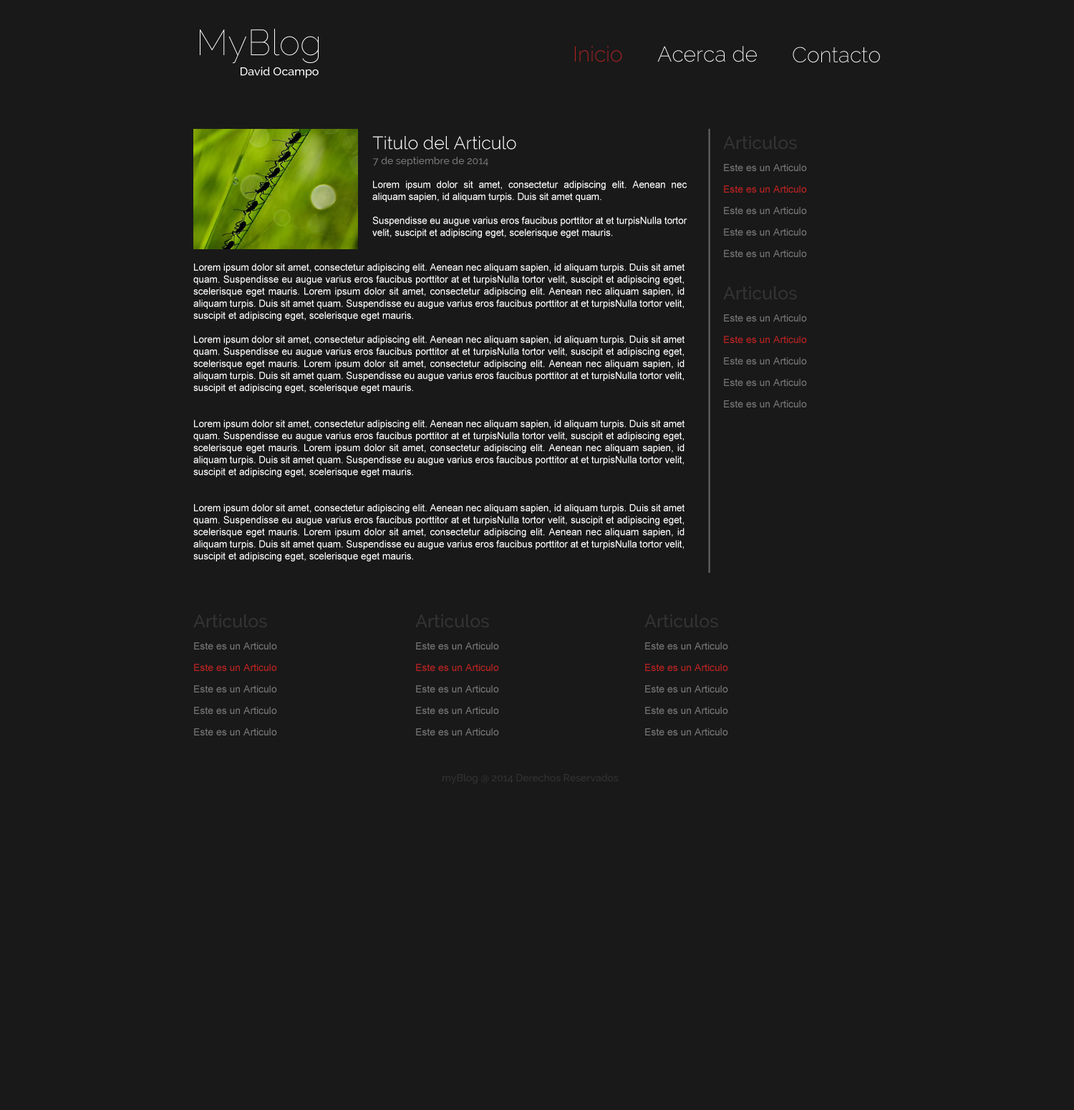
<style>
.page{position:relative;width:1074px;height:1110px;background:#191919}
.page>*{position:absolute;margin:0}
.t1{font:35.8px "Raleway-Thin";color:#ffffff}
.t2{font:21.5px "Raleway-ExtraLight";color:#bf2222}
.t3{font:21.5px "Raleway-ExtraLight";color:#feffff}
.t4{font:11.5px "Raleway-Medium";color:#feffff}
.t5{font:17.9px "Raleway-Light";color:#fefefe}
.t6{font:17.9px "Raleway-Medium";color:#333333}
.t7{font:10px "Raleway-Medium";color:#777777}
.t8{font:10px "ArialMT";color:#777777}
.t9{font:10px "ArialMT";color:#ffffff;scale:0.96 1}
.t10{font:10px "ArialMT";color:#bf2222}
.t11{font:10px "ArialMT";color:#ffffff;scale:0.97 1}
.t12{font:10px "Raleway-Medium";color:#333333}
</style>
<div class="page">
<p class="t1" style="left:200px;top:29px;width:119px;height:35px">MyBlog</p>
<p class="t2" style="left:575px;top:46px;width:47px;height:16px">Inicio</p>
<p class="t3" style="left:657px;top:46px;width:100px;height:16px">Acerca de</p>
<p class="t3" style="left:793px;top:47px;width:87px;height:16px">Contacto</p>
<p class="t4" style="left:241px;top:67px;width:78px;height:11px">David Ocampo</p>
<p class="t5" style="left:372px;top:136px;width:144px;height:14px">Titulo del Articulo</p>
<p class="t6" style="left:723px;top:135px;width:74px;height:15px">Articulos</p>
<p class="t7" style="left:373px;top:157px;width:115px;height:10px">7 de septiembre de 2014</p>
<p class="t8" style="left:724px;top:164px;width:83px;height:7px">Este es un Articulo</p>
<p class="t9" style="left:372px;top:180px;width:316px;height:58px;text-align:justify">Lorem ipsum dolor sit amet, consectetur adipiscing elit. Aenean nec aliquam sapien, id aliquam turpis. Duis sit amet quam.<br><br>Suspendisse eu augue varius eros faucibus porttitor at et turpisNulla tortor velit, suscipit et adipiscing eget, scelerisque eget mauris.</p>
<p class="t10" style="left:724px;top:185px;width:83px;height:8px">Este es un Articulo</p>
<p class="t8" style="left:724px;top:207px;width:83px;height:7px">Este es un Articulo</p>
<p class="t8" style="left:724px;top:228px;width:83px;height:8px">Este es un Articulo</p>
<p class="t8" style="left:724px;top:250px;width:83px;height:7px">Este es un Articulo</p>
<p class="t11" style="left:193px;top:264px;width:492px;height:297px;text-align:justify">Lorem ipsum dolor sit amet, consectetur adipiscing elit. Aenean nec aliquam sapien, id aliquam turpis. Duis sit amet quam. Suspendisse eu augue varius eros faucibus porttitor at et turpisNulla tortor velit, suscipit et adipiscing eget, scelerisque eget mauris. Lorem ipsum dolor sit amet, consectetur adipiscing elit. Aenean nec aliquam sapien, id aliquam turpis. Duis sit amet quam. Suspendisse eu augue varius eros faucibus porttitor at et turpisNulla tortor velit, suscipit et adipiscing eget, scelerisque eget mauris.<br><br>Lorem ipsum dolor sit amet, consectetur adipiscing elit. Aenean nec aliquam sapien, id aliquam turpis. Duis sit amet quam. Suspendisse eu augue varius eros faucibus porttitor at et turpisNulla tortor velit, suscipit et adipiscing eget, scelerisque eget mauris. Lorem ipsum dolor sit amet, consectetur adipiscing elit. Aenean nec aliquam sapien, id aliquam turpis. Duis sit amet quam. Suspendisse eu augue varius eros faucibus porttitor at et turpisNulla tortor velit, suscipit et adipiscing eget, scelerisque eget mauris.<br><br><br>Lorem ipsum dolor sit amet, consectetur adipiscing elit. Aenean nec aliquam sapien, id aliquam turpis. Duis sit amet quam. Suspendisse eu augue varius eros faucibus porttitor at et turpisNulla tortor velit, suscipit et adipiscing eget, scelerisque eget mauris. Lorem ipsum dolor sit amet, consectetur adipiscing elit. Aenean nec aliquam sapien, id aliquam turpis. Duis sit amet quam. Suspendisse eu augue varius eros faucibus porttitor at et turpisNulla tortor velit, suscipit et adipiscing eget, scelerisque eget mauris.<br><br><br>Lorem ipsum dolor sit amet, consectetur adipiscing elit. Aenean nec aliquam sapien, id aliquam turpis. Duis sit amet quam. Suspendisse eu augue varius eros faucibus porttitor at et turpisNulla tortor velit, suscipit et adipiscing eget, scelerisque eget mauris. Lorem ipsum dolor sit amet, consectetur adipiscing elit. Aenean nec aliquam sapien, id aliquam turpis. Duis sit amet quam. Suspendisse eu augue varius eros faucibus porttitor at et turpisNulla tortor velit, suscipit et adipiscing eget, scelerisque eget mauris.</p>
<p class="t6" style="left:723px;top:286px;width:74px;height:14px">Articulos</p>
<p class="t8" style="left:724px;top:314px;width:83px;height:8px">Este es un Articulo</p>
<p class="t10" style="left:724px;top:336px;width:83px;height:7px">Este es un Articulo</p>
<p class="t8" style="left:724px;top:357px;width:83px;height:8px">Este es un Articulo</p>
<p class="t8" style="left:724px;top:379px;width:83px;height:7px">Este es un Articulo</p>
<p class="t8" style="left:724px;top:400px;width:83px;height:7px">Este es un Articulo</p>
<p class="t6" style="left:193px;top:614px;width:74px;height:14px">Articulos</p>
<p class="t6" style="left:415px;top:614px;width:74px;height:14px">Articulos</p>
<p class="t6" style="left:645px;top:614px;width:73px;height:14px">Articulos</p>
<p class="t8" style="left:194px;top:642px;width:83px;height:8px">Este es un Articulo</p>
<p class="t8" style="left:416px;top:642px;width:83px;height:8px">Este es un Articulo</p>
<p class="t8" style="left:645px;top:642px;width:83px;height:8px">Este es un Articulo</p>
<p class="t10" style="left:194px;top:664px;width:83px;height:7px">Este es un Articulo</p>
<p class="t10" style="left:416px;top:664px;width:83px;height:7px">Este es un Articulo</p>
<p class="t10" style="left:645px;top:664px;width:83px;height:7px">Este es un Articulo</p>
<p class="t8" style="left:194px;top:685px;width:83px;height:8px">Este es un Articulo</p>
<p class="t8" style="left:416px;top:685px;width:83px;height:8px">Este es un Articulo</p>
<p class="t8" style="left:645px;top:685px;width:83px;height:8px">Este es un Articulo</p>
<p class="t8" style="left:194px;top:707px;width:83px;height:7px">Este es un Articulo</p>
<p class="t8" style="left:416px;top:707px;width:83px;height:7px">Este es un Articulo</p>
<p class="t8" style="left:645px;top:707px;width:83px;height:7px">Este es un Articulo</p>
<p class="t8" style="left:194px;top:728px;width:83px;height:7px">Este es un Articulo</p>
<p class="t8" style="left:416px;top:728px;width:83px;height:7px">Este es un Articulo</p>
<p class="t8" style="left:645px;top:728px;width:83px;height:7px">Este es un Articulo</p>
<p class="t12" style="left:443px;top:773px;width:176px;height:11px">myBlog @ 2014 Derechos Reservados</p>
</div>
